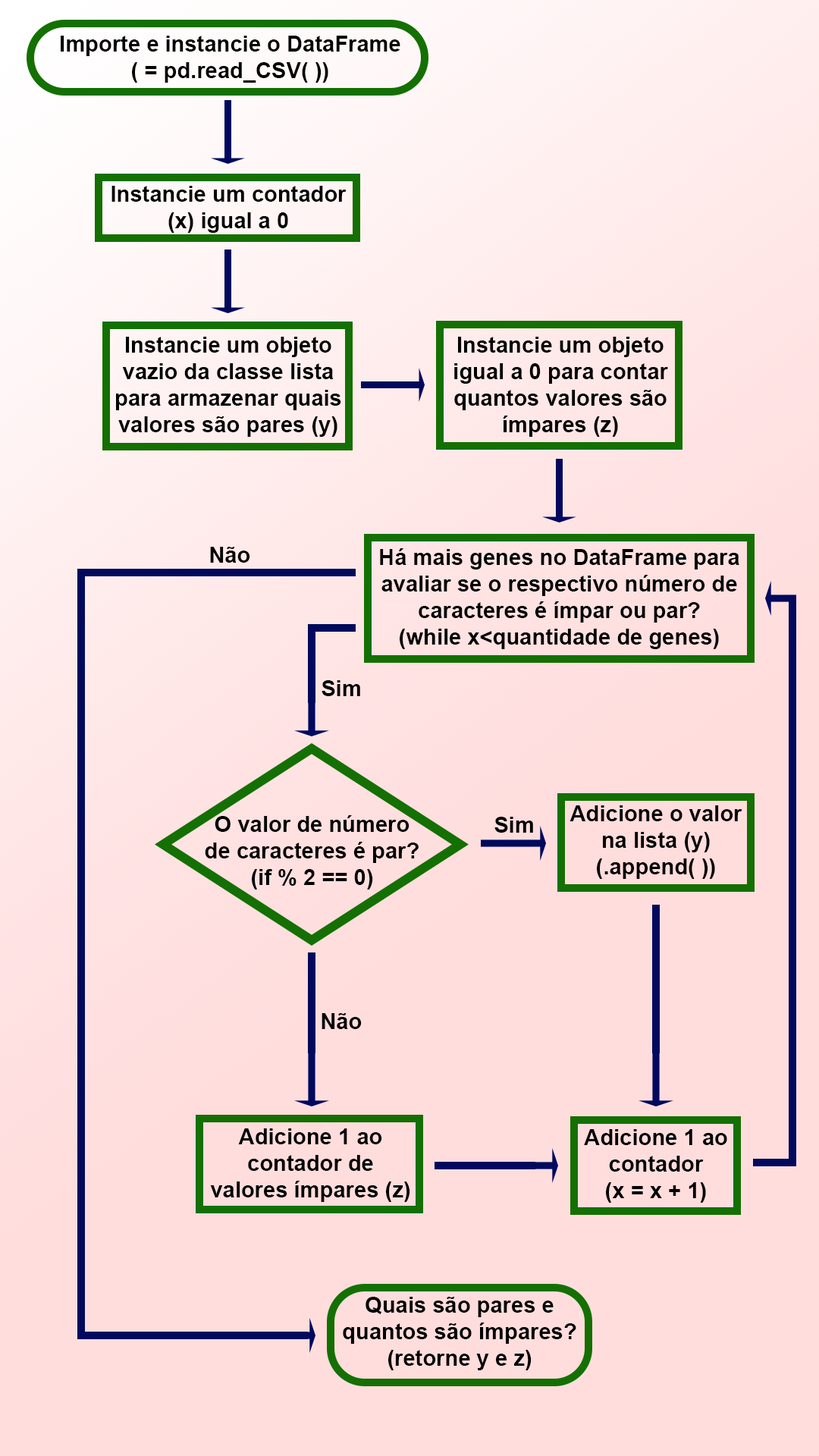
<style>
.page{position:relative;width:819px;height:1456px;background:#ffdddd}
.page>*{position:absolute;margin:0}
.t1{font:22.1px "Arial-BoldMT";color:#000000}
</style>
<div class="page">
<p class="t1" style="left:61px;top:36px;width:339px;height:47px;text-align:center">Importe e instancie o DataFrame<br>( = pd.read_CSV( ))</p>
<p class="t1" style="left:111px;top:186px;width:236px;height:47px;text-align:center">Instancie um contador<br>(x) igual a 0</p>
<p class="t1" style="left:116px;top:337px;width:225px;height:100px;text-align:center">Instancie um objeto<br>vazio da classe lista<br>para armazenar quais<br>valores são pares (y)</p>
<p class="t1" style="left:454px;top:337px;width:214px;height:100px;text-align:center">Instancie um objeto<br>igual a 0 para contar<br>quantos valores são<br>ímpares (z)</p>
<p class="t1" style="left:210px;top:547px;width:40px;height:16px">Não</p>
<p class="t1" style="left:380px;top:548px;width:359px;height:101px;text-align:center">Há mais genes no DataFrame para<br>avaliar se o respectivo número de<br>caracteres é ímpar ou par?<br>(while x&lt;quantidade de genes)</p>
<p class="t1" style="left:322px;top:680px;width:38px;height:16px">Sim</p>
<p class="t1" style="left:570px;top:805px;width:172px;height:74px;text-align:center">Adicione o valor<br>na lista (y)<br>(.append( ))</p>
<p class="t1" style="left:205px;top:815px;width:214px;height:75px;text-align:center">O valor de número<br>de caracteres é par?<br>(if % 2 == 0)</p>
<p class="t1" style="left:494px;top:817px;width:39px;height:16px">Sim</p>
<p class="t1" style="left:322px;top:1013px;width:40px;height:16px">Não</p>
<p class="t1" style="left:210px;top:1128px;width:200px;height:74px;text-align:center">Adicione 1 ao<br>contador de<br>valores ímpares (z)</p>
<p class="t1" style="left:584px;top:1129px;width:143px;height:74px;text-align:center">Adicione 1 ao<br>contador<br>(x = x + 1)</p>
<p class="t1" style="left:343px;top:1297px;width:233px;height:73px;text-align:center">Quais são pares e<br>quantos são ímpares?<br>(retorne y e z)</p>
</div>
